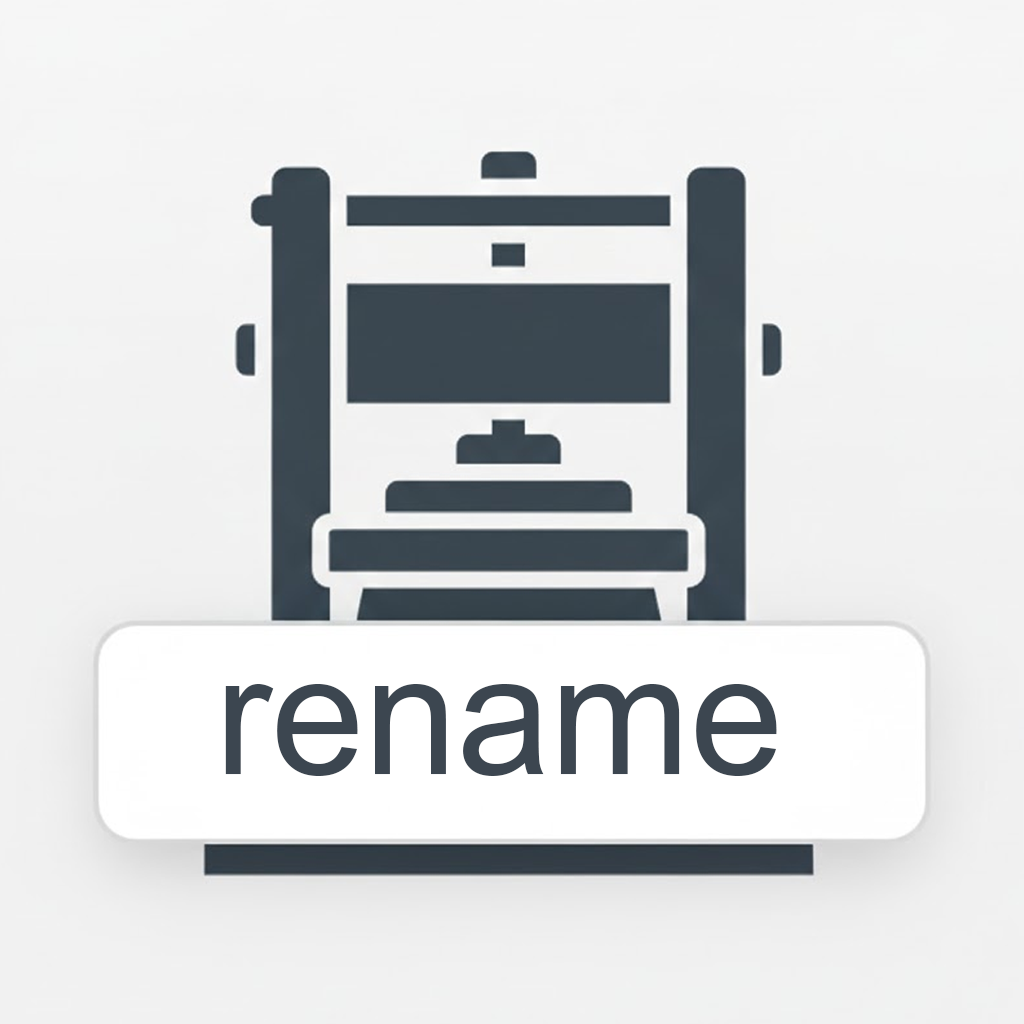
<style>
.page{position:relative;width:1024px;height:1024px}
.page>*{position:absolute;margin:0}
.t1{font:167.5px "ArialMT";color:#3c4650}
</style>
<div class="page">
<p class="t1" style="left:225px;top:684px;width:552px;height:92px">rename</p>
</div>
